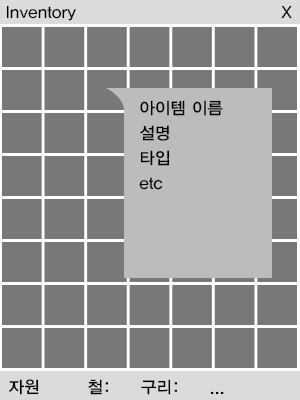
<style>
.page{position:relative;width:300px;height:400px;background:#787878}
.page>*{position:absolute;margin:0}
.t1{font:12px "YDIYGO330";letter-spacing:0.01em;color:#000000}
.t2{font:12px/25px "YDIYGO330";letter-spacing:0.01em;color:#000000}
.t3{font:16.7px "YDIYGO330";letter-spacing:0.01em;color:#010101}
</style>
<div class="page">
<p class="t1" style="left:6px;top:5px;width:70px;height:16px">Inventory</p>
<p class="t1" style="left:281px;top:5px;width:11px;height:14px">X</p>
<p class="t2" style="left:139px;top:100px;width:84px;height:90px">아이템 이름<br>설명<br>타입<br>etc</p>
<p class="t3" style="left:8px;top:379px;width:216px;height:16px">자원        철:     구리:     ...</p>
</div>
